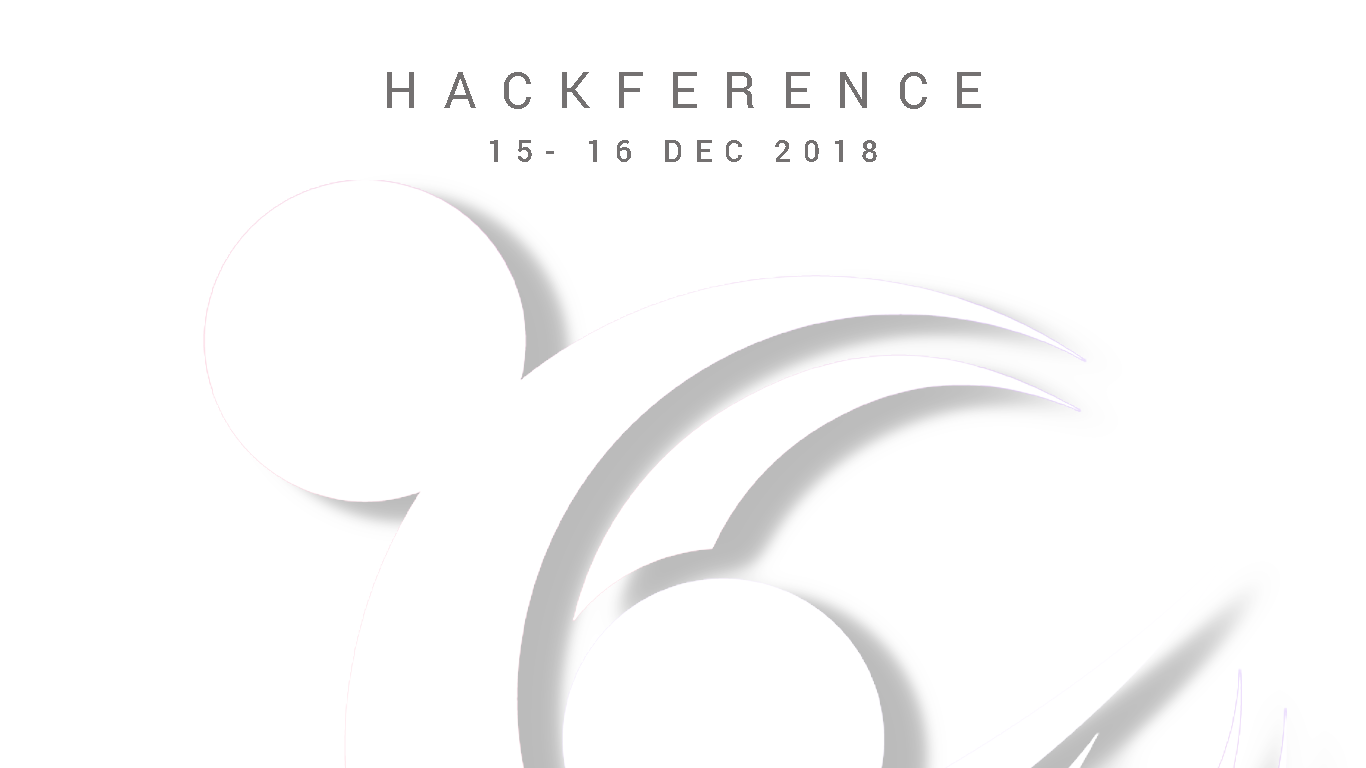
<style>
.page{position:relative;width:1366px;height:768px;background:#ffffff}
.page>*{position:absolute;margin:0}
.t1{font:50px "Roboto-Regular";letter-spacing:0.5em;color:#747171;text-transform:uppercase}
.t2{font:30px "Roboto-Medium";letter-spacing:0.4em;color:#747171}
</style>
<div class="page">
<p class="t1" style="left:387px;top:72px;width:594px;height:37px">hackference</p>
<p class="t2" style="left:490px;top:140px;width:387px;height:22px">15- 16 DEC 2018</p>
</div>
